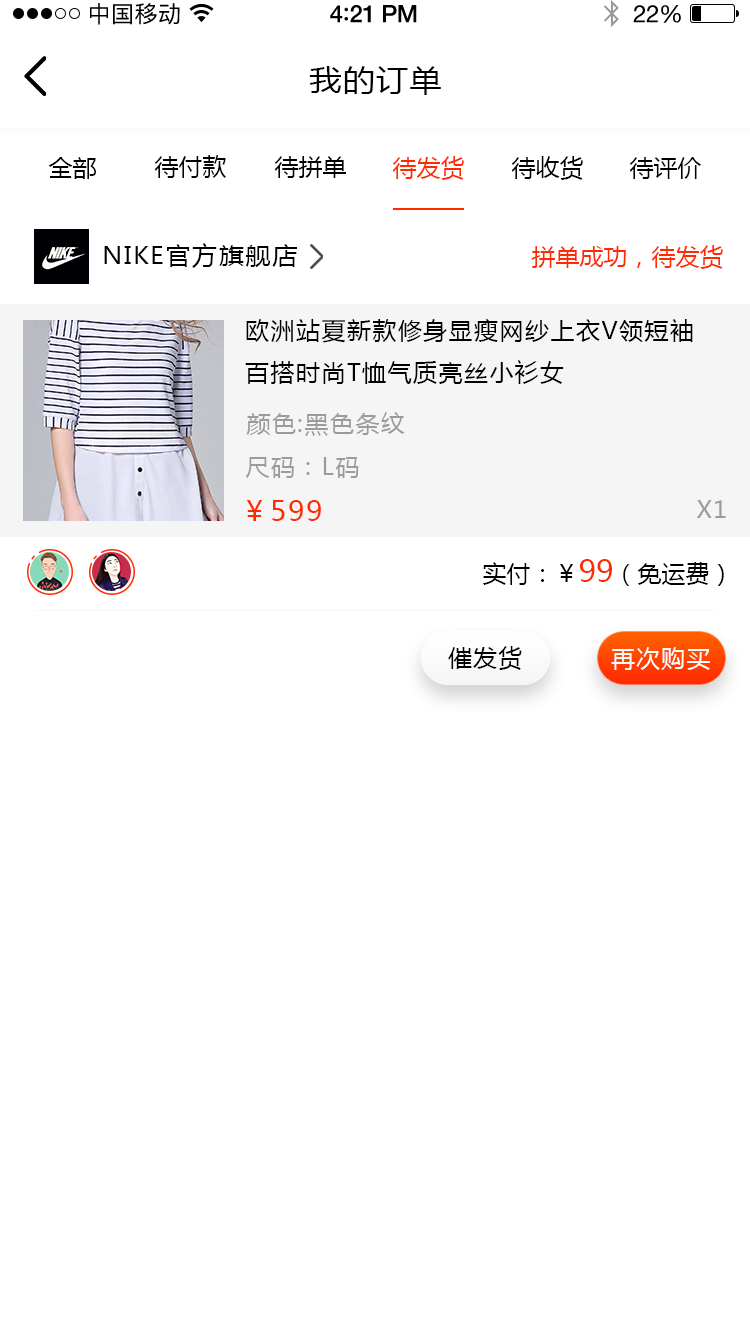
<style>
.page{position:relative;width:750px;height:1334px;background:#ffffff}
.page>*{position:absolute;margin:0}
.t1{font:23px "PingFangSC-Regular";letter-spacing:0.02em;color:#000000}
.t2{font:24px "HelveticaNeue-Medium";letter-spacing:-0.02em;color:#000000}
.t3{font:26px "Avenir-Medium";letter-spacing:-0.02em;color:#000000}
.t4{font:24px "HelveticaNeue";letter-spacing:-0.02em;color:#000000}
.t5{font:30px "MicrosoftYaHei";letter-spacing:0.05em;color:#000000;scale:1.06 1}
.t6{font:24px "MicrosoftYaHei";color:#000000;text-transform:uppercase}
.t7{font:24px "MicrosoftYaHei";color:#ff2a00;text-transform:uppercase}
.t8{font:24px "MicrosoftYaHei";letter-spacing:0.05em;color:#000000;scale:1.06 1}
.t9{font:24px "MicrosoftYaHei";letter-spacing:0.06em;color:#000000;text-transform:uppercase}
.t10{font:24px "MicrosoftYaHei";letter-spacing:0.06em;color:#9b9b9b;text-transform:uppercase}
.t11{font:28px "MicrosoftYaHei";letter-spacing:0.06em;color:#ff2a00;text-transform:uppercase}
.t12{font:30px "MicrosoftYaHei";color:#ff2a00;text-transform:uppercase}
.t13{font:24px "MicrosoftYaHei";letter-spacing:0.05em;color:#000000;text-transform:uppercase}
.t14{font:24px "MicrosoftYaHei";letter-spacing:0.05em;color:#ffffff;text-transform:uppercase}
</style>
<div class="page">
<p class="t1" style="left:90px;top:3px;width:90px;height:22px">中国移动</p>
<p class="t2" style="left:330px;top:5px;width:87px;height:18px">4<span class="t3">:</span>21 PM</p>
<p class="t4" style="left:633px;top:5px;width:48px;height:18px">22%</p>
<p class="t5" style="left:309px;top:66px;width:132px;height:29px">我的订单</p>
<p class="t6" style="left:48px;top:157px;width:48px;height:22px">全部</p>
<p class="t6" style="left:154px;top:155px;width:72px;height:23px">待付款</p>
<p class="t6" style="left:274px;top:156px;width:72px;height:22px">待拼单</p>
<p class="t7" style="left:392px;top:156px;width:72px;height:24px">待发货</p>
<p class="t6" style="left:511px;top:156px;width:72px;height:24px">待收货</p>
<p class="t6" style="left:629px;top:157px;width:73px;height:22px">待评价</p>
<p class="t8" style="left:104px;top:243px;width:193px;height:25px">NIKE官方旗舰店</p>
<p class="t7" style="left:531px;top:245px;width:192px;height:24px">拼单成功，待发货</p>
<p class="t9" style="left:245px;top:319px;width:448px;height:65px">欧洲站夏新款修身显瘦网纱上衣v领短袖百搭时尚t恤气质亮丝小衫女</p>
<p class="t10" style="left:246px;top:412px;width:159px;height:24px">颜色:黑色条纹</p>
<p class="t10" style="left:245px;top:457px;width:114px;height:21px">尺码：L码</p>
<p class="t11" style="left:246px;top:500px;width:75px;height:21px">￥599</p>
<p class="t10" style="left:696px;top:500px;width:30px;height:18px">x1</p>
<p class="t6" style="left:483px;top:559px;width:241px;height:27px">实付：￥<span class="t12">99</span>（免运费）</p>
<p class="t13" style="left:448px;top:646px;width:74px;height:24px">催发货</p>
<p class="t14" style="left:611px;top:647px;width:99px;height:23px">再次购买</p>
</div>
